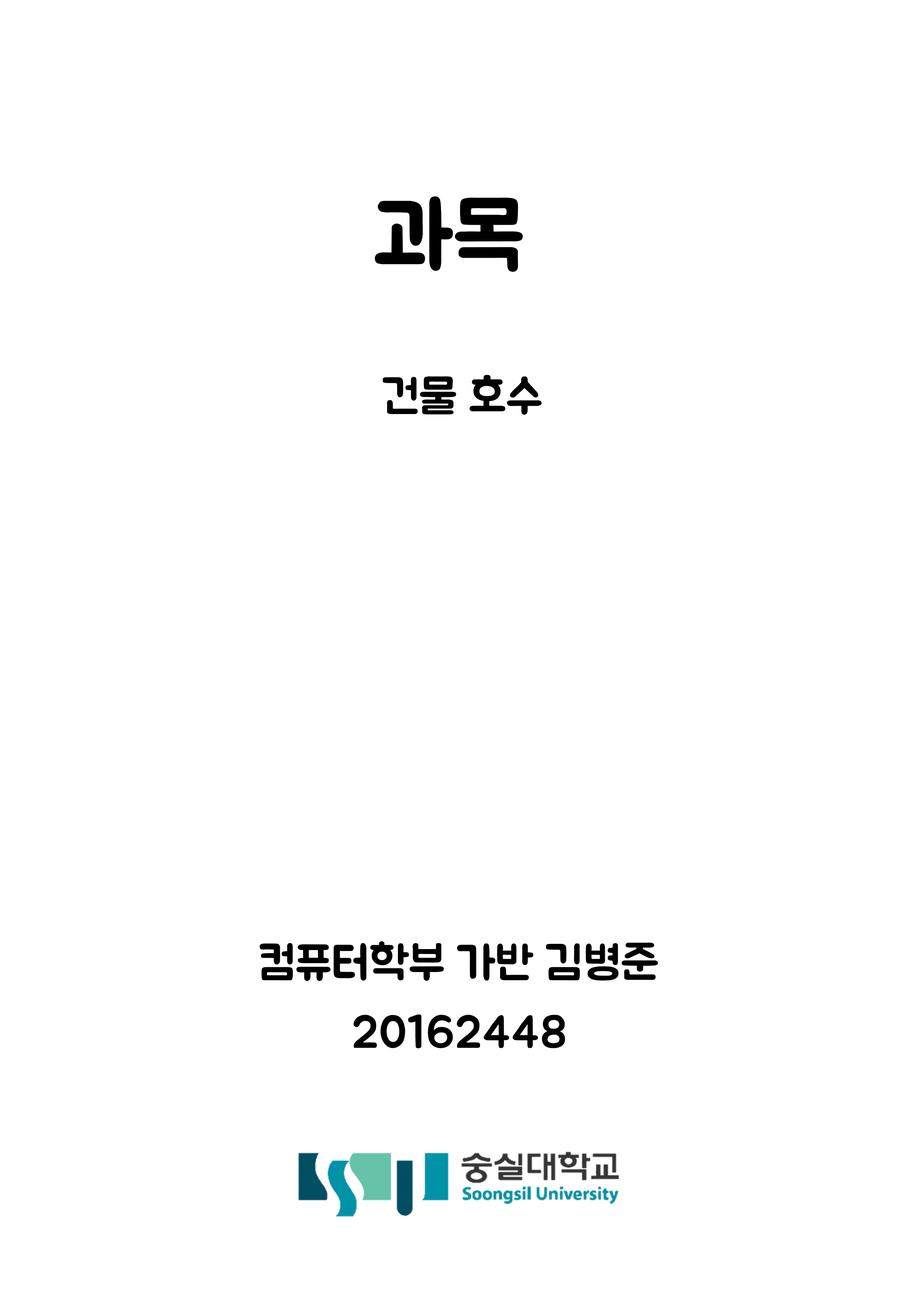
<style>
.page{position:relative;width:918px;height:1299px;background:#ffffff}
.page>*{position:absolute;margin:0}
.t1{font:92.6px "BMJUA";color:#000000}
.t2{font:46.3px "BMJUA";color:#000000}
</style>
<div class="page">
<p class="t1" style="left:375px;top:196px;width:148px;height:76px">과목</p>
<p class="t2" style="left:382px;top:375px;width:160px;height:40px">건물 호수</p>
<p class="t2" style="left:260px;top:941px;width:398px;height:40px">컴퓨터학부 가반 김병준</p>
<p class="t2" style="left:354px;top:1014px;width:211px;height:34px">20162448</p>
</div>
